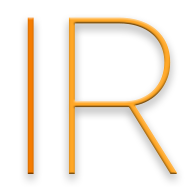
<style>
.page{position:relative;width:192px;height:192px;background:#ffffff}
.page>*{position:absolute;margin:0}
.t1{font:220px "Roboto-Thin";letter-spacing:-0.05em;color:#f57c00}
.t2{font:220px "Roboto-Thin";letter-spacing:-0.05em;color:#ffa726}
</style>
<div class="page">
<p class="t1" style="left:27px;top:17px;width:150px;height:157px">I<span class="t2">R</span></p>
</div>
